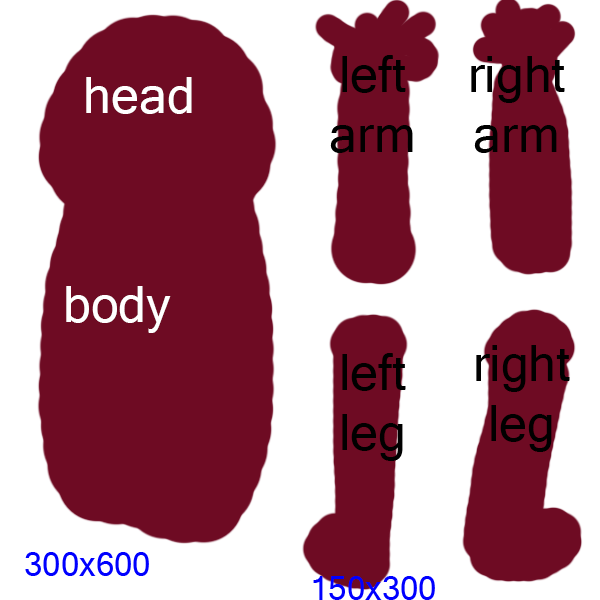
<style>
.page{position:relative;width:600px;height:600px;background:#6e0b23}
.page>*{position:absolute;margin:0}
.t1{font:50px "MicrosoftSansSerif";color:#000000}
.t2{font:50px "MicrosoftSansSerif";color:#ffffff}
.t3{font:33px "MicrosoftSansSerif";color:#0000ff}
</style>
<div class="page">
<p class="t1" style="left:330px;top:55px;width:83px;height:98px;text-align:center">left arm</p>
<p class="t1" style="left:471px;top:56px;width:94px;height:97px;text-align:center">right arm</p>
<p class="t2" style="left:86px;top:77px;width:106px;height:37px">head</p>
<p class="t2" style="left:66px;top:286px;width:105px;height:47px">body</p>
<p class="t1" style="left:342px;top:353px;width:64px;height:108px;text-align:center">left leg</p>
<p class="t1" style="left:476px;top:345px;width:94px;height:107px;text-align:center">right leg</p>
<p class="t3" style="left:25px;top:552px;width:124px;height:24px">300x600</p>
<p class="t3" style="left:313px;top:576px;width:122px;height:24px">150x300</p>
</div>
